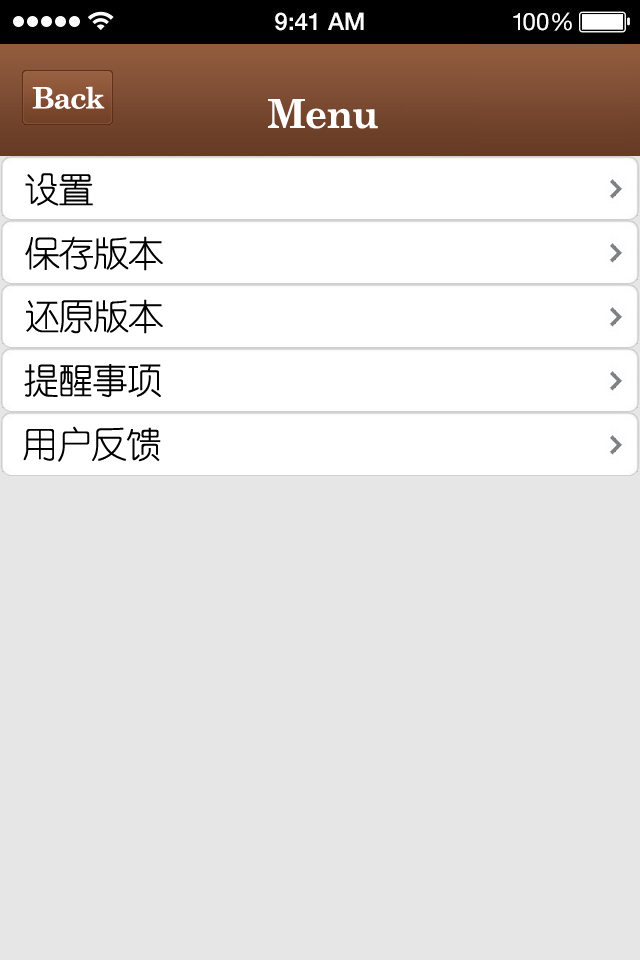
<style>
.page{position:relative;width:640px;height:960px;background:#e6e6e6}
.page>*{position:absolute;margin:0}
.t1{font:29.3px "CenturySchoolbook-Bold";letter-spacing:-0.04em;color:#ffffff}
.t2{font:40px "CenturySchoolbook-Bold";letter-spacing:-0.04em;color:#fffefe}
.t3{font:36px "YouYuan";letter-spacing:-0.04em;color:#000000}
</style>
<div class="page">
<p class="t1" style="left:32px;top:86px;width:73px;height:23px">Back</p>
<p class="t2" style="left:268px;top:99px;width:110px;height:30px">Menu</p>
<p class="t3" style="left:25px;top:173px;width:68px;height:33px">设置</p>
<p class="t3" style="left:25px;top:236px;width:138px;height:35px">保存版本</p>
<p class="t3" style="left:26px;top:299px;width:137px;height:35px">还原版本</p>
<p class="t3" style="left:24px;top:364px;width:137px;height:33px">提醒事项</p>
<p class="t3" style="left:23px;top:426px;width:138px;height:36px">用户反馈</p>
</div>
